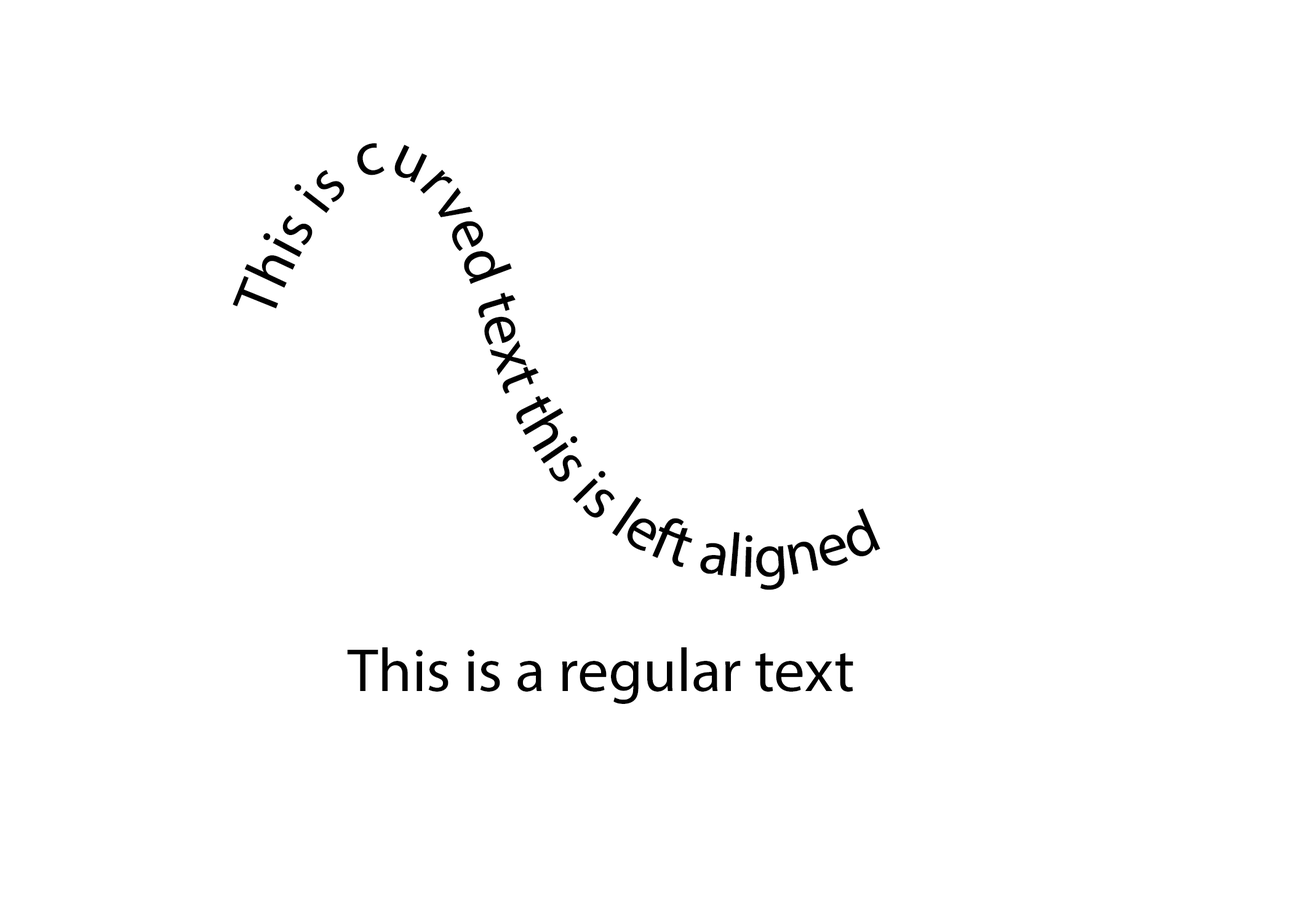
<style>
.page{position:relative;width:1292px;height:923px;background:#ffffff}
.page>*{position:absolute;margin:0}
.t1{font:61.5px "MyriadPro-Regular";color:#000000}
</style>
<div class="page">
<p class="t1" style="left:233px;top:143px;width:647px;height:447px">This is curved text this is left aligned</p>
<p class="t1" style="left:347px;top:647px;width:506px;height:57px">This is a regular text</p>
</div>
